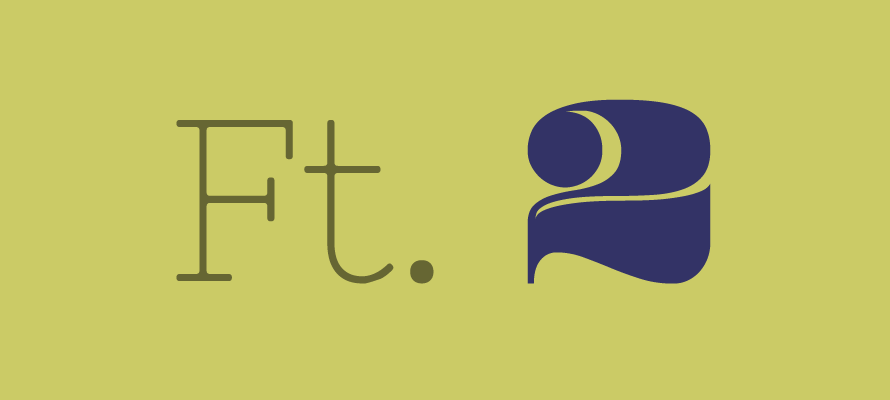
<style>
.page{position:relative;width:890px;height:400px;background:#cbcb66}
.page>*{position:absolute;margin:0}
.t1{font:230px "NixieOne-Regular";color:#666633}
.t2{font:300px "Pompadour-Black";color:#333366}
</style>
<div class="page">
<p class="t1" style="left:176px;top:99px;width:535px;height:185px">Ft. <span class="t2">2</span></p>
</div>
